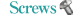
<style>
.page{position:relative;width:73px;height:15px;background:#ffffff}
.page>*{position:absolute;margin:0}
.t1{font:16px "RyuminPro-ExBold";letter-spacing:-0.08em;color:#239e9f}
</style>
<div class="page">
<p class="t1" style="left:9px;top:1px;width:48px;height:13px">Screws</p>
</div>
